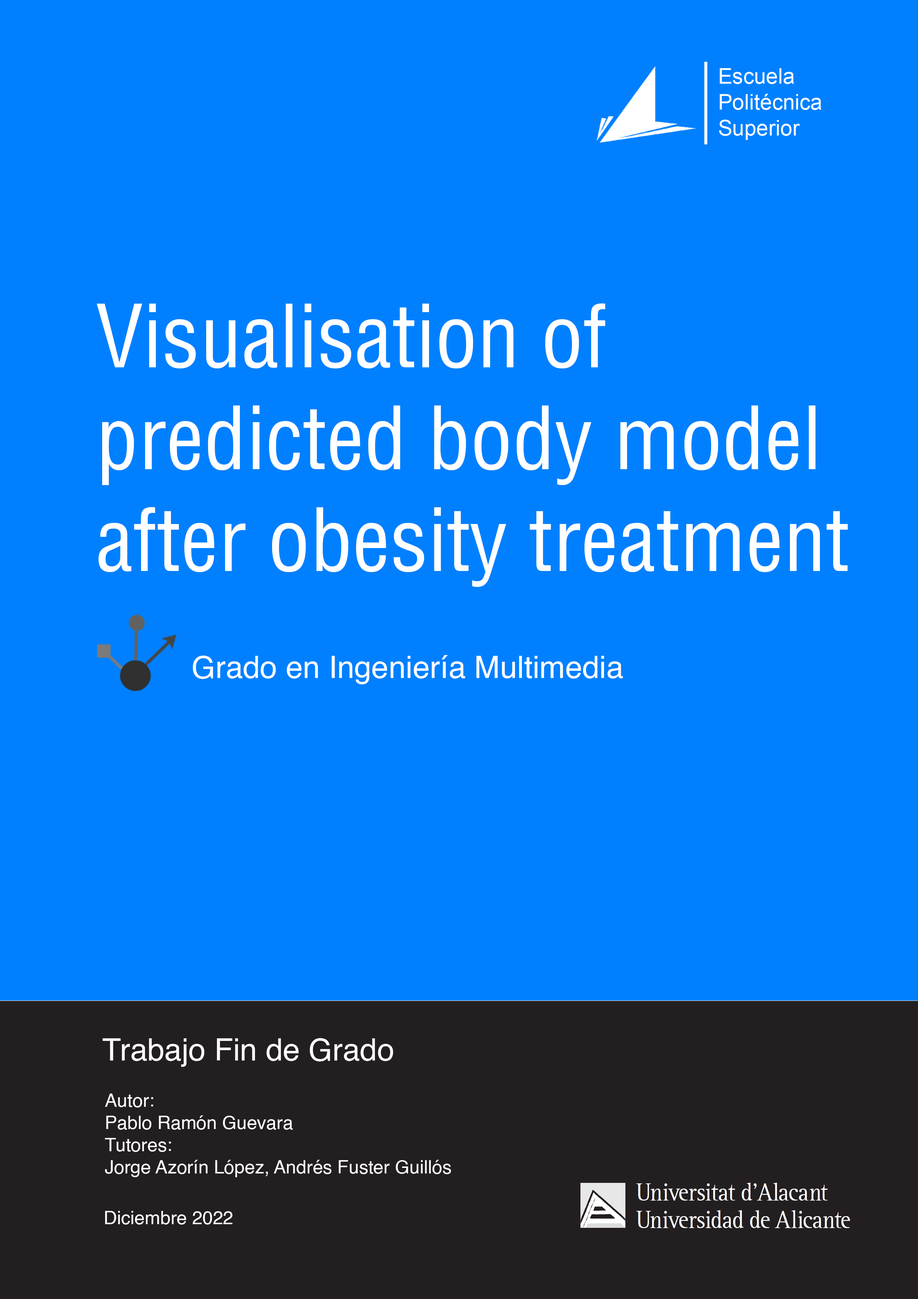
<style>
.page{position:relative;width:918px;height:1299px;background:#0080ff}
.page>*{position:absolute;margin:0}
.t1{font:84.8px "HelveticaLTStd-Cond";color:#ffffff}
.t2{font:30.9px "Helvetica";color:#ffffff}
.t3{font:18.5px "Helvetica";color:#ffffff}
</style>
<div class="page">
<p class="t1" style="left:97px;top:303px;width:751px;height:284px">Visualisation of<br>predicted body model<br>after obesity treatment</p>
<p class="t2" style="left:193px;top:655px;width:430px;height:29px">Grado en Ingeniería Multimedia</p>
<p class="t2" style="left:103px;top:1038px;width:290px;height:29px">Trabajo Fin de Grado</p>
<p class="t3" style="left:105px;top:1093px;width:346px;height:84px">Autor:<br>Pablo Ramón Guevara<br>Tutores: <br>Jorge Azorín López, Andrés Fuster Guillós</p>
<p class="t3" style="left:105px;top:1211px;width:127px;height:13px">Diciembre 2022</p>
</div>
